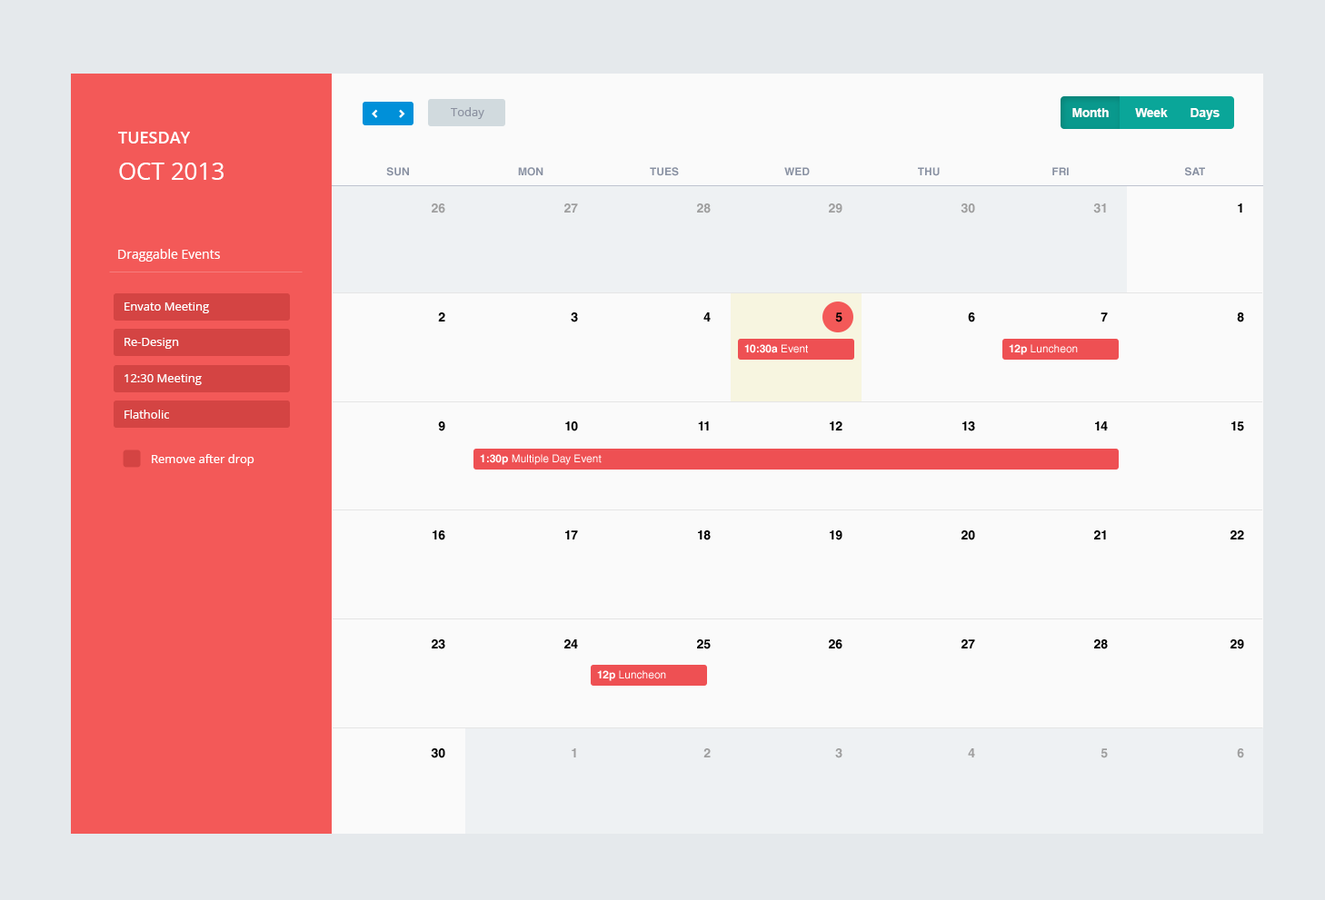
<style>
.page{position:relative;width:1325px;height:900px;background:#fafafa}
.page>*{position:absolute;margin:0}
.t1{font:11.8px "OpenSans";color:#8b91a0}
.t2{font:12.4px "Arial-BoldMT";color:#ffffff}
.t3{font:16.4px "OpenSans-Semibold";color:#ffffff}
.t4{font:23.6px "OpenSans";color:#ffffff}
.t5{font:10.9px "HelveticaLTStd-Bold";color:#8991a2;text-transform:uppercase}
.t6{font:12.7px/109px "HelveticaLTStd-Bold";color:#000000}
.t7{font:12.7px/109px "HelveticaLTStd-Bold";color:#9e9e9e}
.t8{font:12.7px "OpenSans";color:#ffffff}
.t9{font:11.8px "OpenSans";color:#ffffff}
.t10{font:10.9px "HelveticaLTStd-Bold";color:#ffffff}
.t11{font:10.9px "HelveticaLTStd-Roman";color:#ffffff}
</style>
<div class="page">
<p class="t1" style="left:451px;top:107px;width:33px;height:12px">Today</p>
<p class="t2" style="left:1072px;top:108px;width:36px;height:9px">Month</p>
<p class="t2" style="left:1135px;top:108px;width:32px;height:9px">Week</p>
<p class="t2" style="left:1190px;top:108px;width:29px;height:12px">Days</p>
<p class="t3" style="left:118px;top:132px;width:72px;height:12px">TUESDAY</p>
<p class="t4" style="left:119px;top:163px;width:104px;height:17px">OCT 2013</p>
<p class="t5" style="left:386px;top:167px;width:23px;height:9px">Sun</p>
<p class="t5" style="left:518px;top:167px;width:25px;height:9px">Mon</p>
<p class="t5" style="left:650px;top:167px;width:29px;height:9px">Tues</p>
<p class="t5" style="left:784px;top:167px;width:25px;height:8px">Wed</p>
<p class="t5" style="left:918px;top:167px;width:21px;height:9px">Thu</p>
<p class="t5" style="left:1052px;top:167px;width:16px;height:8px">Fri</p>
<p class="t5" style="left:1185px;top:167px;width:20px;height:9px">Sat</p>
<p class="t6" style="left:431px;top:203px;width:14px;height:556px;text-align:right"><span class="t7">26<br></span>2<br>9<br>16<br>23<br>30</p>
<p class="t6" style="left:564px;top:203px;width:14px;height:555px;text-align:right"><span class="t7">27<br></span>3<br>10<br>17<br>24<br><span class="t7">1</span></p>
<p class="t6" style="left:697px;top:203px;width:13px;height:555px;text-align:right"><span class="t7">28<br></span>4<br>11<br>18<br>25<br><span class="t7">2</span></p>
<p class="t6" style="left:829px;top:203px;width:13px;height:556px;text-align:right"><span class="t7">29<br></span>5<br>12<br>19<br>26<br><span class="t7">3</span></p>
<p class="t6" style="left:960px;top:203px;width:15px;height:555px;text-align:right"><span class="t7">30<br></span>6<br>13<br>20<br>27<br><span class="t7">4</span></p>
<p class="t6" style="left:1093px;top:203px;width:14px;height:556px;text-align:right"><span class="t7">31<br></span>7<br>14<br>21<br>28<br><span class="t7">5</span></p>
<p class="t6" style="left:1230px;top:203px;width:14px;height:556px;text-align:right">1<br>8<br>15<br>22<br>29<br><span class="t7">6</span></p>
<p class="t8" style="left:118px;top:249px;width:102px;height:13px">Draggable Events</p>
<p class="t9" style="left:124px;top:303px;width:85px;height:10px">Envato Meeting</p>
<p class="t9" style="left:124px;top:338px;width:55px;height:11px">Re-Design</p>
<p class="t10" style="left:744px;top:344px;width:64px;height:9px">10:30a <span class="t11">Event</span></p>
<p class="t11" style="left:1008px;top:344px;width:69px;height:11px"><span class="t10">12p </span>Luncheon</p>
<p class="t9" style="left:124px;top:374px;width:78px;height:11px">12:30 Meeting</p>
<p class="t9" style="left:124px;top:410px;width:45px;height:9px">Flatholic</p>
<p class="t9" style="left:152px;top:454px;width:102px;height:12px">Remove after drop</p>
<p class="t11" style="left:480px;top:454px;width:121px;height:11px"><span class="t10">1:30p </span>Multiple Day Event</p>
<p class="t11" style="left:597px;top:670px;width:69px;height:11px"><span class="t10">12p </span>Luncheon</p>
</div>
